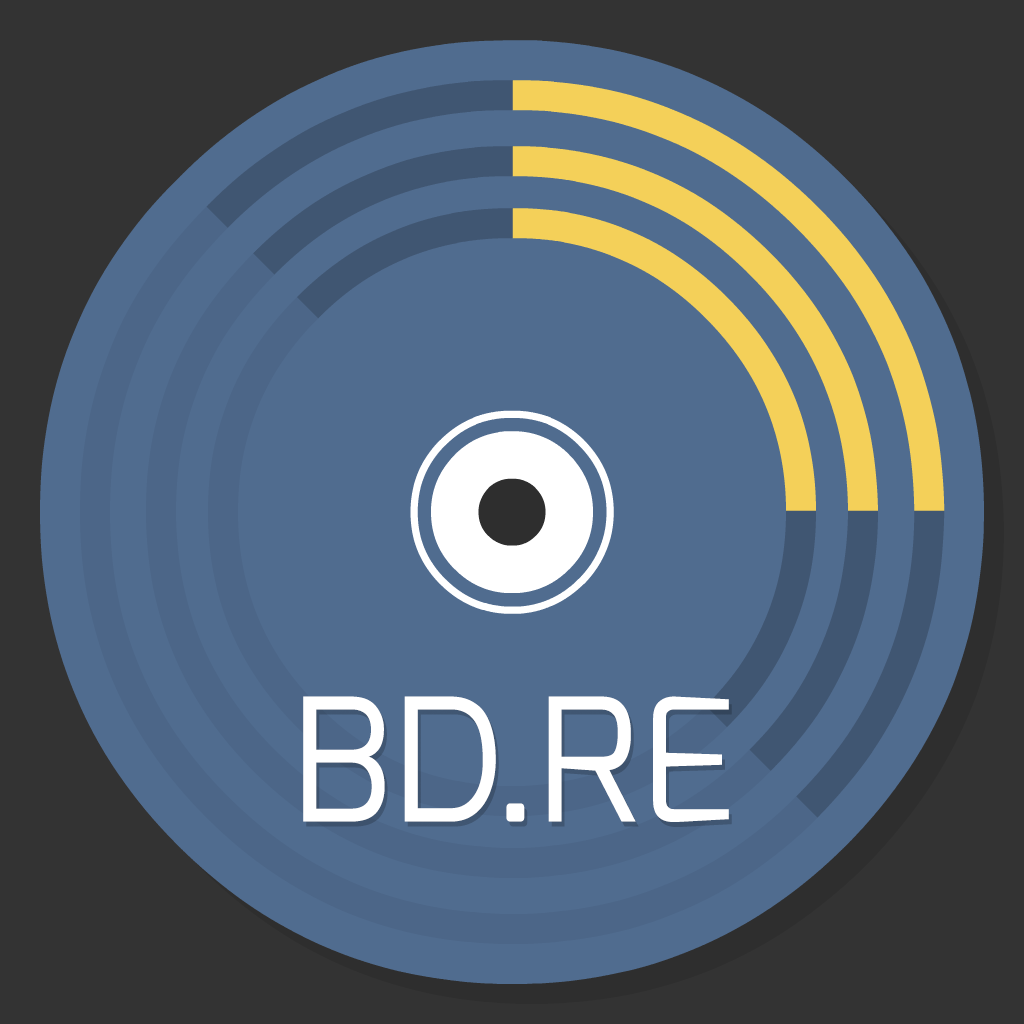
<style>
.page{position:relative;width:1024px;height:1024px;background:#506c8f}
.page>*{position:absolute;margin:0}
.t1{font:170.3px "Exo-Regular";color:#ffffff}
</style>
<div class="page">
<p class="t1" style="left:303px;top:696px;width:426px;height:126px">BD.RE</p>
</div>
